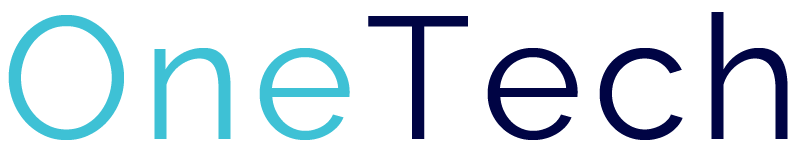
<style>
.page{position:relative;width:800px;height:156px;background:#ffffff}
.page>*{position:absolute;margin:0}
.t1{font:173.5px "Raleway";letter-spacing:0.06em;color:#000444}
.t2{font:173.5px "Raleway";letter-spacing:0.06em;color:#3ec1d5}
</style>
<div class="page">
<p class="t1" style="left:8px;top:12px;width:780px;height:128px"><span class="t2">One</span>Tech</p>
</div>
